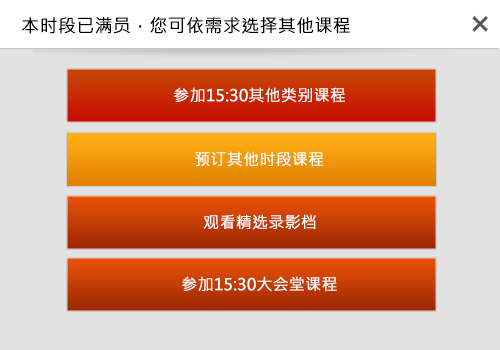
<style>
.page{position:relative;width:500px;height:350px;background:#e2e2e2}
.page>*{position:absolute;margin:0}
.t1{font:18px "MicrosoftJhengHeiRegular";color:#000000;font-weight:bold}
.t2{font:16px "MicrosoftJhengHeiRegular";color:#ffffff;font-weight:bold}
</style>
<div class="page">
<p class="t1" style="left:22px;top:17px;width:328px;height:17px">本时段已满员，您可依需求选择其他课程</p>
<p class="t2" style="left:174px;top:87px;width:171px;height:16px">参加15:30其他类别课程</p>
<p class="t2" style="left:195px;top:151px;width:129px;height:16px">预订其他时段课程</p>
<p class="t2" style="left:203px;top:214px;width:113px;height:16px">观看精选录影档</p>
<p class="t2" style="left:182px;top:276px;width:155px;height:16px">参加15:30大会堂课程</p>
</div>
